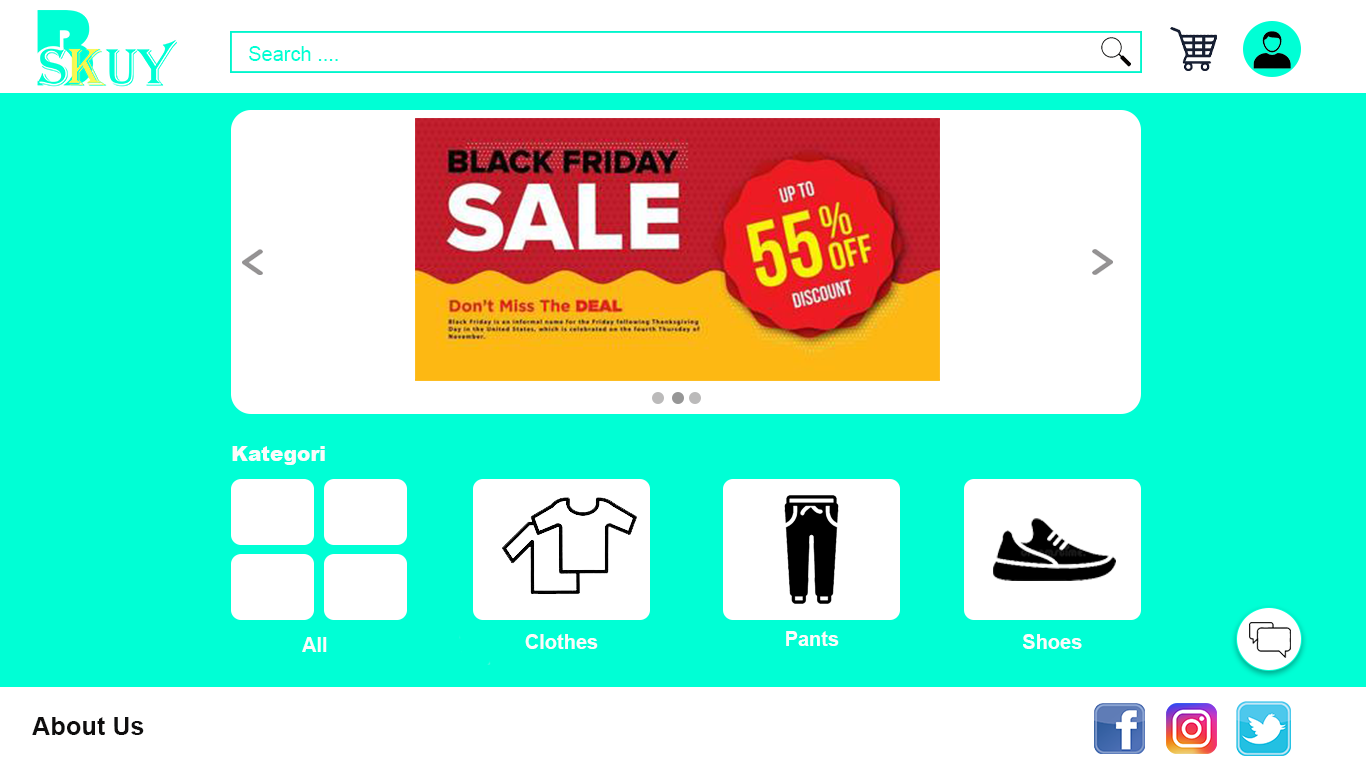
<style>
.page{position:relative;width:1366px;height:768px;background:#ffffff}
.page>*{position:absolute;margin:0}
.t1{font:20px "ArialMT";color:#00ffd5}
.t2{font:20px "Arial-Black";color:#fbfbfb}
.t3{font:20px "Arial-BoldMT";color:#fbfbfb}
.t4{font:25.4px "Arial-BoldMT";color:#0f0e0e}
</style>
<div class="page">
<p class="t1" style="left:249px;top:46px;width:89px;height:15px">Search ....</p>
<p class="t2" style="left:232px;top:446px;width:93px;height:19px">Kategori</p>
<p class="t3" style="left:302px;top:637px;width:25px;height:15px">All</p>
<p class="t3" style="left:525px;top:634px;width:73px;height:15px">Clothes</p>
<p class="t3" style="left:786px;top:631px;width:53px;height:15px">Pants</p>
<p class="t3" style="left:1023px;top:634px;width:59px;height:15px">Shoes</p>
<p class="t4" style="left:32px;top:717px;width:112px;height:18px">About Us</p>
</div>
